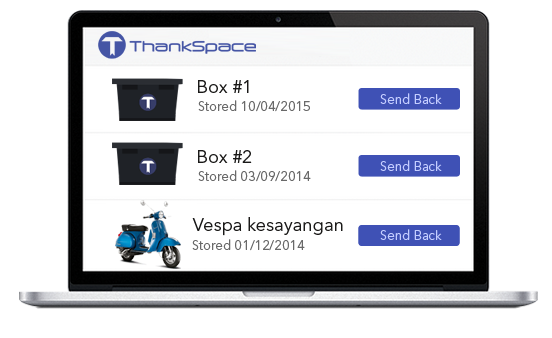
<style>
.page{position:relative;width:552px;height:338px;background:#ffffff}
.page>*{position:absolute;margin:0}
.t1{font:18px "AvenirNextLTPro-Regular";color:#1a1918}
.t2{font:13px "AvenirNextLTPro-Regular";color:#696969}
.t3{font:13px "AvenirNextLTPro-Regular";color:#c4cdff}
</style>
<div class="page">
<p class="t1" style="left:198px;top:80px;width:51px;height:13px">Box #1</p>
<p class="t2" style="left:198px;top:100px;width:112px;height:12px">Stored 10/04/2015</p>
<p class="t3" style="left:380px;top:93px;width:62px;height:11px">Send Back</p>
<p class="t1" style="left:198px;top:150px;width:54px;height:13px">Box #2</p>
<p class="t3" style="left:380px;top:160px;width:62px;height:11px">Send Back</p>
<p class="t2" style="left:198px;top:170px;width:113px;height:12px">Stored 03/09/2014</p>
<p class="t1" style="left:192px;top:217px;width:151px;height:19px">Vespa kesayangan</p>
<p class="t3" style="left:380px;top:229px;width:62px;height:11px">Send Back</p>
<p class="t2" style="left:192px;top:239px;width:113px;height:12px">Stored 01/12/2014</p>
</div>
